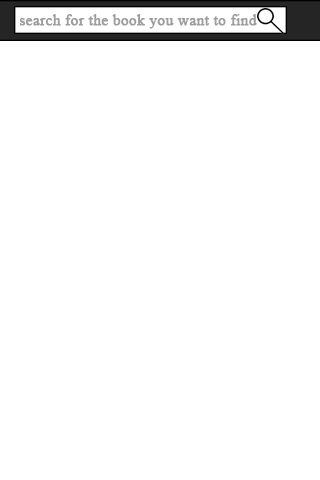
<style>
.page{position:relative;width:320px;height:480px;background:#ffffff}
.page>*{position:absolute;margin:0}
.t1{font:15.3px "TimesNewRomanPSMT";color:#9e9d9d;font-weight:bold}
</style>
<div class="page">
<p class="t1" style="left:19px;top:14px;width:238px;height:15px">search for the book you want to find</p>
</div>
